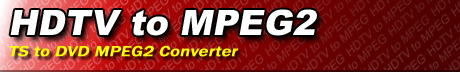
<style>
.page{position:relative;width:460px;height:72px}
.page>*{position:absolute;margin:0}
.t1{font:35px "Arial-Black";color:#ffffff;font-style:italic}
.t2{font:15px "FranklinGothic-Medium";color:#ffff00;font-weight:bold;font-style:italic;scale:1.2 1}
</style>
<div class="page">
<p class="t1" style="left:10px;top:9px;width:307px;height:27px">HDTV to MPEG2</p>
<p class="t2" style="left:9px;top:45px;width:230px;height:12px">TS to DVD MPEG2 Converter</p>
</div>
